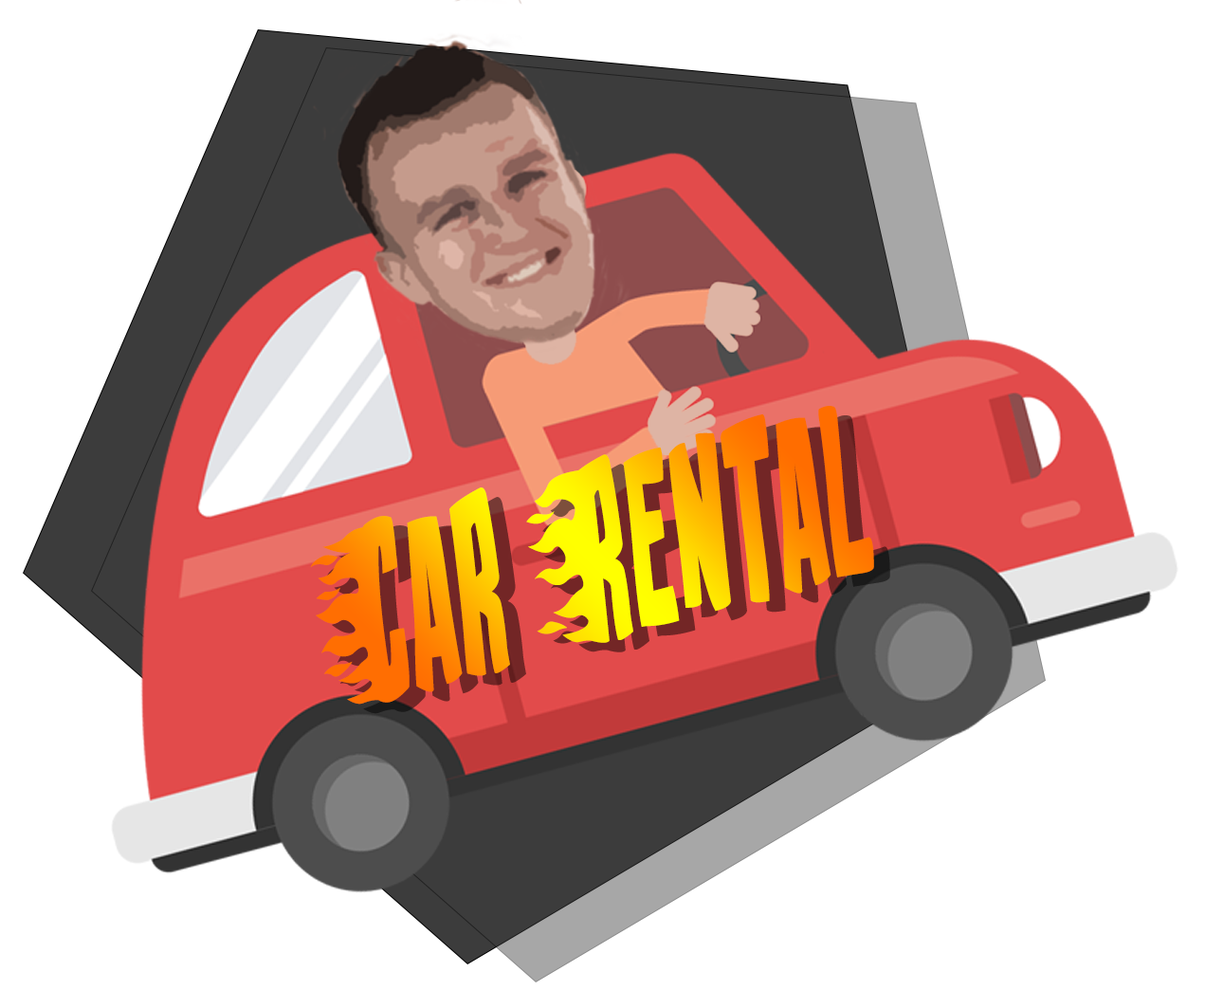
<style>
.page{position:relative;width:1205px;height:990px;background:#ffffff}
.page>*{position:absolute;margin:0}
.t1{font:142.5px "PlayWithFire";scale:0.55 1}
</style>
<div class="page">
<p class="t1" style="left:310px;top:406px;width:564px;height:298px;rotate:-15deg">Car Rental</p>
</div>
